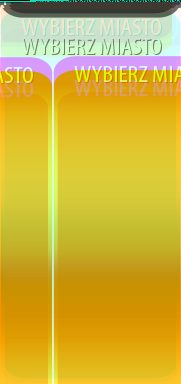
<style>
.page{position:relative;width:181px;height:384px}
.page>*{position:absolute;margin:0}
.t1{font:23.7px "MyriadPro-Cond";color:#f3e5cc;text-transform:uppercase;scale:1.12 1}
</style>
<div class="page">
<p class="t1" style="left:21px;top:17px;width:140px;height:16px">Wybierz miasto</p>
</div>
